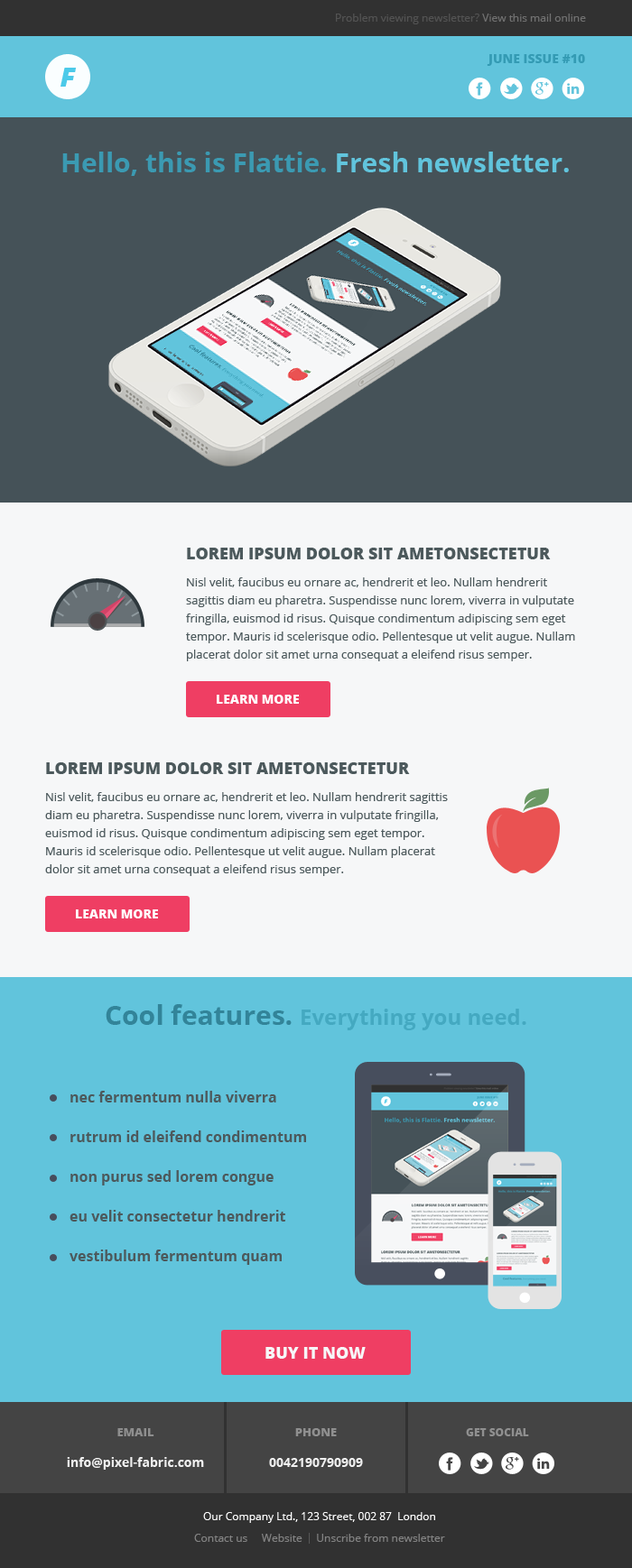
<style>
.page{position:relative;width:632px;height:1568px;background:#f6f7f8}
.page>*{position:absolute;margin:0}
.t1{font:10.8px "OpenSans";color:#535353}
.t2{font:10.8px "OpenSans";color:#717171}
.t3{font:12.6px "OpenSans-Extrabold";color:#349bb4;text-transform:uppercase}
.t4{font:27.1px "OpenSans-ExtraboldItalic";color:#4ccae9}
.t5{font:27.1px "OpenSans-Bold";color:#3b9ab2}
.t6{font:27.1px "OpenSans-Bold";color:#61c4dc}
.t7{font:11.7px/18px "OpenSans";color:#4c595c}
.t8{font:16.2px/21.7px "OpenSans-Extrabold";color:#4c595c;text-transform:uppercase}
.t9{font:11.7px/27.1px "OpenSans";color:#4c595c}
.t10{font:11.7px/16.2px "OpenSans";color:#4c595c}
.t11{font:12.6px "OpenSans-Extrabold";color:#ffffff;text-transform:uppercase}
.t12{font:21.7px "OpenSans-Bold";color:#44a9c1}
.t13{font:27.1px "OpenSans-Bold";color:#328499}
.t14{font:14.4px/39.7px "OpenSans-Bold";color:#4c595c}
.t15{font:16.2px "OpenSans-Extrabold";color:#f6f7f8;text-transform:uppercase}
.t16{font:12.6px/30.7px "OpenSans-Bold";color:#f0f0f0}
.t17{font:11.7px/19.8px "OpenSans-Extrabold";color:#8e8e8e}
.t18{font:11.7px/19.8px "OpenSans-Extrabold";color:#8f8f8f;text-transform:uppercase}
.t19{font:10.8px "OpenSans-Extrabold";color:#8f8f8f;text-transform:uppercase}
.t20{font:10.8px "OpenSans";color:#ffffff}
.t21{font:10.8px "OpenSans";color:#838383}
</style>
<div class="page">
<p class="t1" style="left:336px;top:14px;width:250px;height:10px">Problem viewing newsletter?<span class="t2"> View this mail online</span></p>
<p class="t3" style="left:486px;top:54px;width:99px;height:12px">June issue #10</p>
<p class="t4" style="left:60px;top:68px;width:17px;height:19px">F</p>
<p class="t5" style="left:62px;top:152px;width:506px;height:24px">Hello, this is Flattie. <span class="t6">Fresh newsletter.</span></p>
<p class="t7" style="left:186px;top:548px;width:389px;height:113px"><span class="t8">Lorem ipsum dolor sit ametonsectetur<br></span><span class="t9">Nisl velit, faucibus eu ornare ac, hendrerit et leo. </span><span class="t10">Nullam </span>hendrerit sagittis diam eu pharetra. Suspendisse nunc lorem, viverra in vulputate fringilla, euismod id risus. Quisque condimentum adipiscing sem eget tempor. Mauris id scelerisque odio. Pellentesque ut velit augue. Nullam placerat dolor sit amet urna consequat a eleifend risus semper.</p>
<p class="t11" style="left:217px;top:695px;width:82px;height:9px">Learn more</p>
<p class="t7" style="left:45px;top:762px;width:402px;height:114px"><span class="t8">Lorem ipsum dolor sit ametonsectetur<br></span><span class="t9">Nisl velit, faucibus eu ornare ac, hendrerit et leo. </span><span class="t10">Nullam </span>hendrerit sagittis diam eu pharetra. Suspendisse nunc lorem, viverra in vulputate fringilla, euismod id risus. Quisque condimentum adipiscing sem eget tempor. Mauris id scelerisque odio. Pellentesque ut velit augue. Nullam placerat dolor sit amet urna consequat a eleifend risus semper.</p>
<p class="t11" style="left:76px;top:909px;width:82px;height:9px">Learn more</p>
<p class="t12" style="left:106px;top:1004px;width:420px;height:26px"><span class="t13">Cool features. </span>Everything you need.</p>
<p class="t14" style="left:69px;top:1091px;width:237px;height:174px">nec fermentum nulla viverra<br>rutrum id eleifend condimentum<br>non purus sed lorem congue<br>eu velit consectetur hendrerit <br>vestibulum fermentum quam</p>
<p class="t15" style="left:265px;top:1347px;width:100px;height:12px">Buy it now</p>
<p class="t16" style="left:67px;top:1428px;width:137px;height:42px;text-align:center"><span class="t17">EMAIL<br></span>info@pixel-fabric.com</p>
<p class="t16" style="left:269px;top:1428px;width:94px;height:39px;text-align:center"><span class="t18">Phone<br></span>0042190790909</p>
<p class="t19" style="left:466px;top:1428px;width:63px;height:8px">GET SOCIAL</p>
<p class="t20" style="left:203px;top:1512px;width:232px;height:11px">Our Company Ltd., 123 Street, 002 87  London</p>
<p class="t21" style="left:194px;top:1534px;width:251px;height:8px">Contact us     Website     Unscribe from newsletter</p>
</div>
